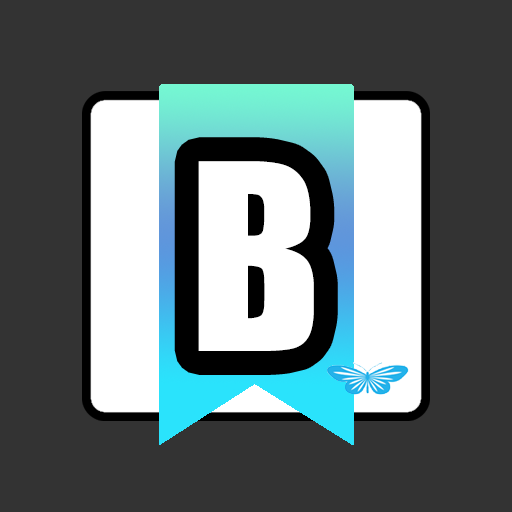
<style>
.page{position:relative;width:512px;height:512px;background:#333333}
.page>*{position:absolute;margin:0}
.t1{font:240px "Impact";color:#ffffff}
</style>
<div class="page">
<p class="t1" style="left:198px;top:161px;width:116px;height:190px">B</p>
</div>
